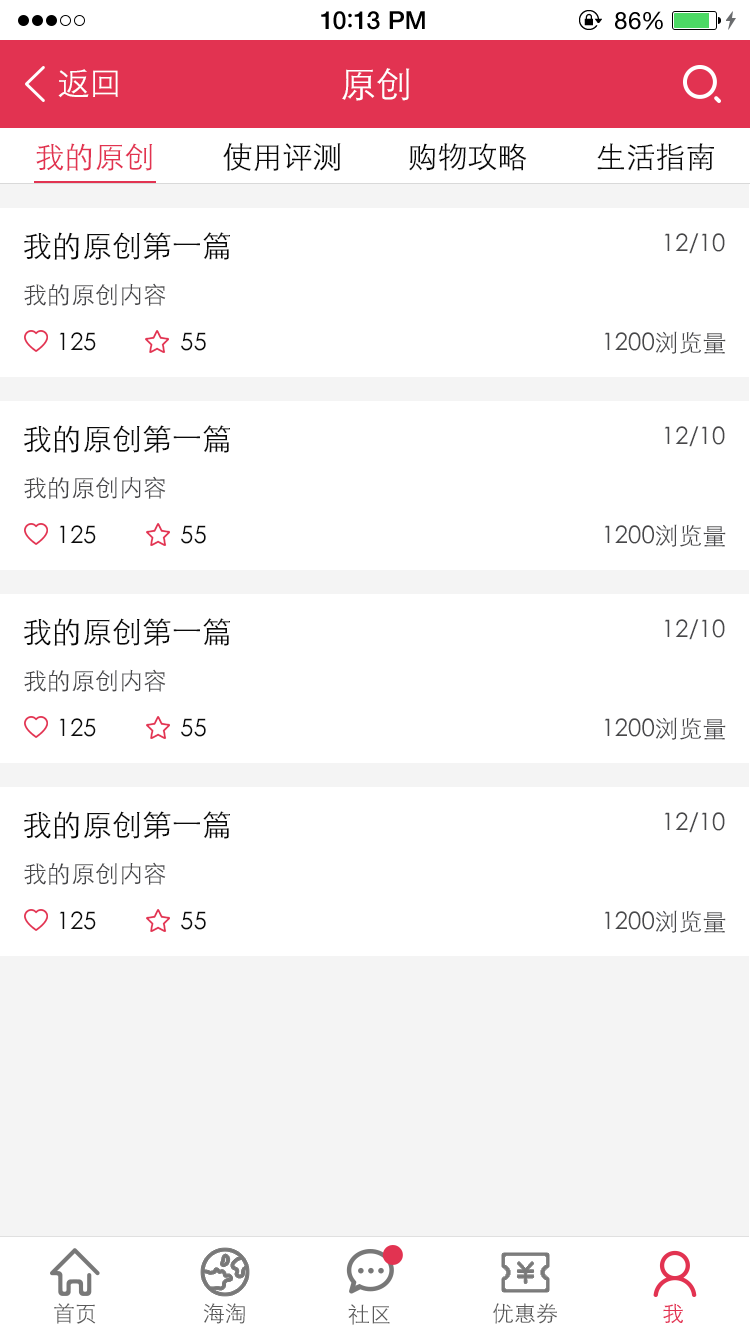
<style>
.page{position:relative;width:750px;height:1334px;background:#ffffff}
.page>*{position:absolute;margin:0}
.t1{font:25px "HelveticaNeue-Medium";letter-spacing:0.015em;color:#000000}
.t2{font:25px "ArialRoundedMTBold";letter-spacing:0.015em;color:#000000}
.t3{font:24px "HelveticaNeue";letter-spacing:0.03em;color:#000000}
.t4{font:33px "STXihei";color:#ffffff}
.t5{font:36px "STXihei";color:#ffffff}
.t6{font:30px "STXihei";color:#e23351}
.t7{font:30px "STXihei";color:#0a0a0a}
.t8{font:24px "STXihei";color:#48484a}
.t9{font:24px "STXihei";color:#0a0a0a}
.t10{font:21.9px "STXihei";color:#5a5a5a}
.t11{font:21.9px "STXihei";color:#e23351}
</style>
<div class="page">
<p class="t1" style="left:321px;top:11px;width:104px;height:19px">10<span class="t2">:</span>13 PM</p>
<p class="t3" style="left:615px;top:11px;width:48px;height:19px">86%</p>
<p class="t4" style="left:58px;top:69px;width:60px;height:29px">返回</p>
<p class="t5" style="left:342px;top:68px;width:68px;height:33px">原创</p>
<p class="t6" style="left:36px;top:143px;width:117px;height:28px">我的原创</p>
<p class="t7" style="left:223px;top:143px;width:118px;height:28px">使用评测</p>
<p class="t7" style="left:409px;top:143px;width:118px;height:28px">购物攻略</p>
<p class="t7" style="left:597px;top:143px;width:117px;height:28px">生活指南</p>
<p class="t7" style="left:24px;top:232px;width:206px;height:28px">我的原创第一篇</p>
<p class="t8" style="left:664px;top:233px;width:61px;height:21px">12/10</p>
<p class="t8" style="left:24px;top:283px;width:142px;height:23px">我的原创内容</p>
<p class="t9" style="left:59px;top:332px;width:37px;height:19px">125</p>
<p class="t9" style="left:181px;top:332px;width:25px;height:19px">55</p>
<p class="t8" style="left:604px;top:331px;width:122px;height:23px">1200浏览量</p>
<p class="t7" style="left:24px;top:425px;width:206px;height:28px">我的原创第一篇</p>
<p class="t8" style="left:664px;top:426px;width:61px;height:21px">12/10</p>
<p class="t8" style="left:24px;top:476px;width:142px;height:23px">我的原创内容</p>
<p class="t9" style="left:59px;top:525px;width:37px;height:19px">125</p>
<p class="t9" style="left:181px;top:525px;width:25px;height:19px">55</p>
<p class="t8" style="left:604px;top:524px;width:122px;height:23px">1200浏览量</p>
<p class="t7" style="left:24px;top:618px;width:206px;height:28px">我的原创第一篇</p>
<p class="t8" style="left:664px;top:619px;width:61px;height:21px">12/10</p>
<p class="t8" style="left:24px;top:669px;width:142px;height:23px">我的原创内容</p>
<p class="t9" style="left:59px;top:718px;width:37px;height:19px">125</p>
<p class="t9" style="left:181px;top:718px;width:25px;height:19px">55</p>
<p class="t8" style="left:604px;top:717px;width:122px;height:23px">1200浏览量</p>
<p class="t7" style="left:24px;top:811px;width:206px;height:28px">我的原创第一篇</p>
<p class="t8" style="left:664px;top:812px;width:61px;height:21px">12/10</p>
<p class="t8" style="left:24px;top:862px;width:142px;height:23px">我的原创内容</p>
<p class="t9" style="left:59px;top:911px;width:37px;height:19px">125</p>
<p class="t9" style="left:181px;top:911px;width:25px;height:19px">55</p>
<p class="t8" style="left:604px;top:910px;width:122px;height:23px">1200浏览量</p>
<p class="t10" style="left:54px;top:1303px;width:42px;height:21px">首页</p>
<p class="t10" style="left:203px;top:1303px;width:42px;height:21px">海淘</p>
<p class="t10" style="left:348px;top:1304px;width:42px;height:21px">社区</p>
<p class="t10" style="left:492px;top:1303px;width:65px;height:21px">优惠券</p>
<p class="t11" style="left:663px;top:1303px;width:20px;height:20px">我</p>
</div>
